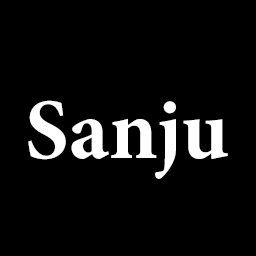
<style>
.page{position:relative;width:256px;height:256px;background:#000000}
.page>*{position:absolute;margin:0}
.t1{font:86.1px "MinionPro-Bold";color:#ffffff}
</style>
<div class="page">
<p class="t1" style="left:28px;top:100px;width:200px;height:79px">Sanju</p>
</div>
